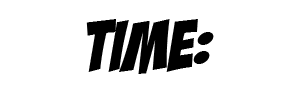
<style>
.page{position:relative;width:300px;height:100px;background:#ffffff}
.page>*{position:absolute;margin:0}
.t1{font:70.6px "BadaBoomBB";color:#000000}
</style>
<div class="page">
<p class="t1" style="left:86px;top:19px;width:128px;height:55px">:Time</p>
</div>
